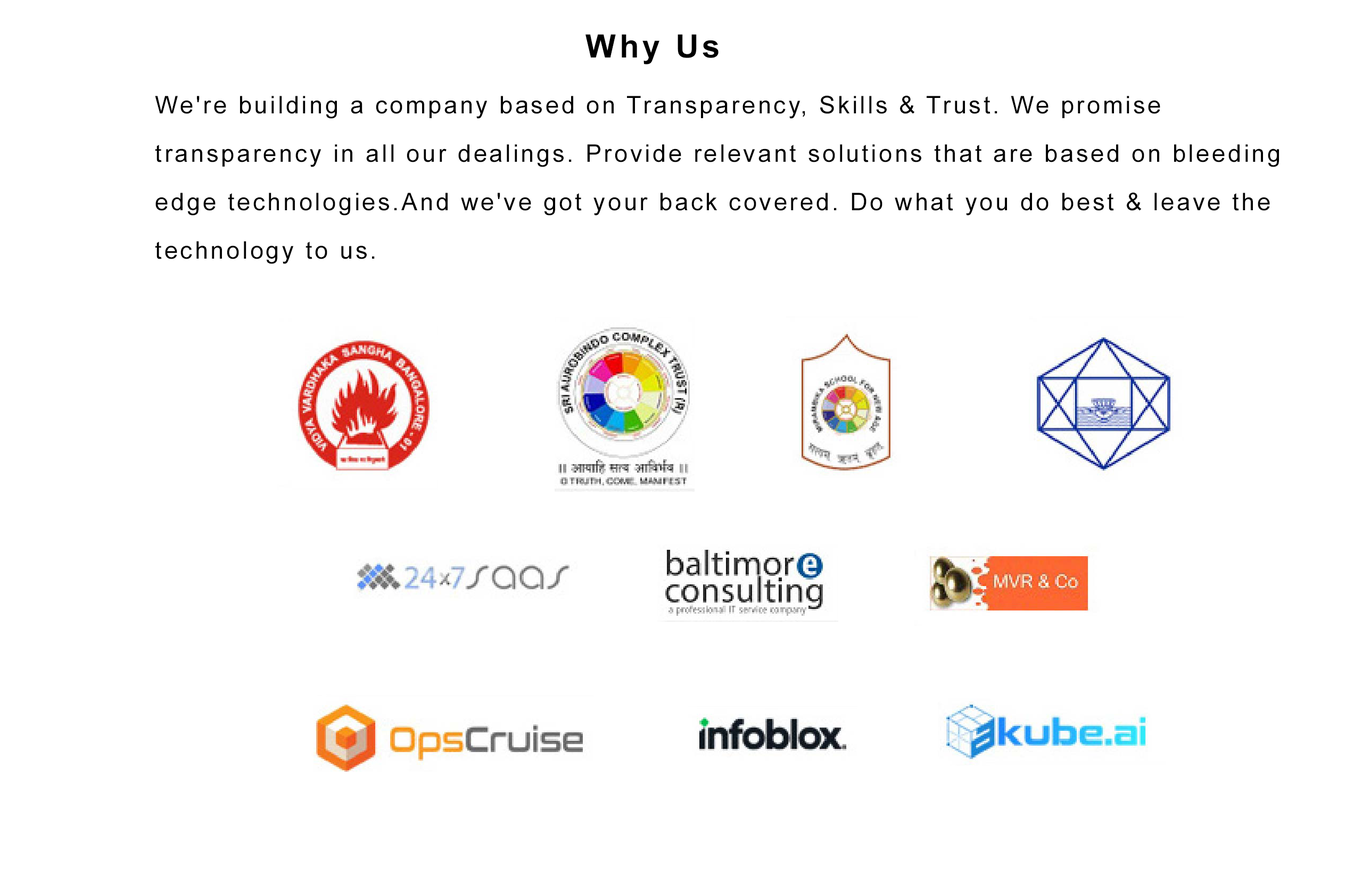
<style>
.page{position:relative;width:1362px;height:875px;background:#ffffff}
.page>*{position:absolute;margin:0}
.t1{font:32.2px "Arial-BoldMT";letter-spacing:0.1em;color:#000000}
.t2{font:24.2px/48.4px "ArialMT";letter-spacing:0.1em;color:#000000}
</style>
<div class="page">
<p class="t1" style="left:586px;top:34px;width:133px;height:30px">Why Us</p>
<p class="t2" style="left:155px;top:95px;width:1124px;height:169px">We're building a company based on Transparency, Skills &amp; Trust. We promise <br>transparency in all our dealings. Provide relevant solutions that are based on bleeding <br>edge technologies.And we've got your back covered. Do what you do best &amp; leave the <br>technology to us.</p>
</div>
